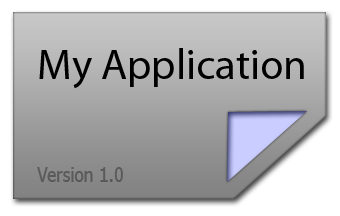
<style>
.page{position:relative;width:340px;height:216px}
.page>*{position:absolute;margin:0}
.t1{font:42.8px "MyriadPro-Regular";color:#000000}
.t2{font:20.3px "Nina";color:#5a5a5a}
</style>
<div class="page">
<p class="t1" style="left:39px;top:48px;width:265px;height:41px">My Application</p>
<p class="t2" style="left:37px;top:167px;width:86px;height:15px">Version 1.0</p>
</div>
